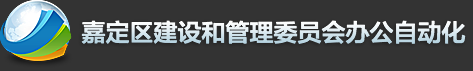
<style>
.page{position:relative;width:473px;height:71px;background:#333333}
.page>*{position:absolute;margin:0}
.t1{font:24px "FZLTZHK--GBK1-0"}
</style>
<div class="page">
<p class="t1" style="left:81px;top:20px;width:385px;height:24px">嘉定区建设和管理委员会办公自动化</p>
</div>
